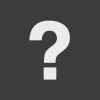
<style>
.page{position:relative;width:100px;height:100px;background:#3c3c3c}
.page>*{position:absolute;margin:0}
.t1{font:80px "Helvetica-Bold";color:#ebebeb;font-weight:bold}
</style>
<div class="page">
<p class="t1" style="left:29px;top:20px;width:41px;height:60px">?</p>
</div>
